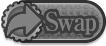
<style>
.page{position:relative;width:106px;height:46px}
.page>*{position:absolute;margin:0}
.t1{font:25px "RyuminPro-ExBold";letter-spacing:-0.08em;color:#818181;scale:0.9 1}
</style>
<div class="page">
<p class="t1" style="left:45px;top:11px;width:51px;height:24px">Swap</p>
</div>
